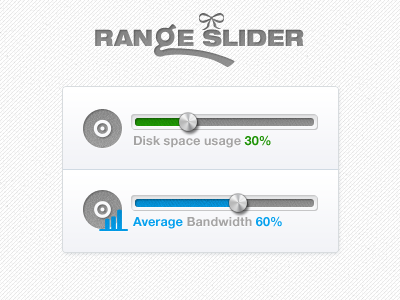
<style>
.page{position:relative;width:400px;height:300px}
.page>*{position:absolute;margin:0}
.t1{font:22.4px "HelveticaNeueLT-BlackExt";color:#939393;text-transform:uppercase;scale:0.91 1}
.t2{font:12.7px "HelveticaNeueLT-Bold";color:#a5a4a4}
.t3{font:12.7px "HelveticaNeueLT-Bold";color:#1e9206}
.t4{font:12.7px "HelveticaNeueLT-Bold";color:#07a1ee}
</style>
<div class="page">
<p class="t1" style="left:95px;top:29px;width:209px;height:18px">Ran    e Slider</p>
<p class="t2" style="left:134px;top:135px;width:137px;height:13px">Disk space usage <span class="t3">30%</span></p>
<p class="t2" style="left:133px;top:216px;width:149px;height:13px"><span class="t4">Average</span> Bandwidth <span class="t4">60%</span></p>
</div>
